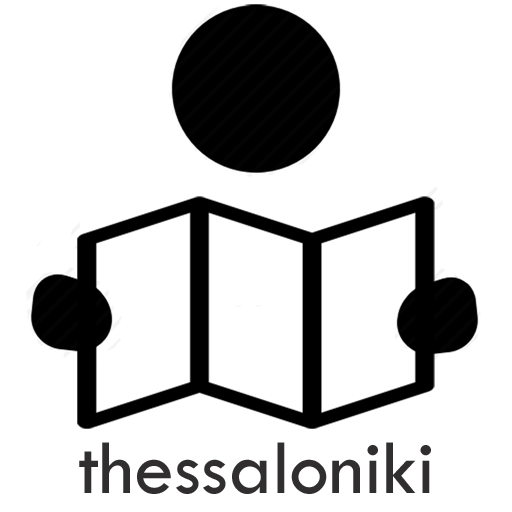
<style>
.page{position:relative;width:512px;height:512px;background:#ffffff}
.page>*{position:absolute;margin:0}
.t1{font:79.9px "TwCenMT-Regular";color:#302e2e}
</style>
<div class="page">
<p class="t1" style="left:79px;top:442px;width:352px;height:52px">thessaloniki</p>
</div>
